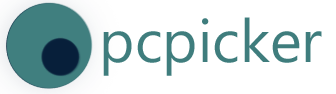
<style>
.page{position:relative;width:336px;height:94px;background:#ffffff}
.page>*{position:absolute;margin:0}
.t1{font:60px "SegoeUI";color:#3f7d7d}
</style>
<div class="page">
<p class="t1" style="left:103px;top:17px;width:219px;height:59px">pcpicker</p>
</div>
